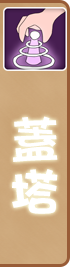
<style>
.page{position:relative;width:70px;height:267px}
.page>*{position:absolute;margin:0}
.t1{font:50px/5px "DFHaiBao-W9-WINP-BF";letter-spacing:0.05em;color:#ffffff}
</style>
<div class="page">
<p class="t1" style="left:12px;top:116px;width:46px;height:98px;text-align:center">蓋塔</p>
</div>
